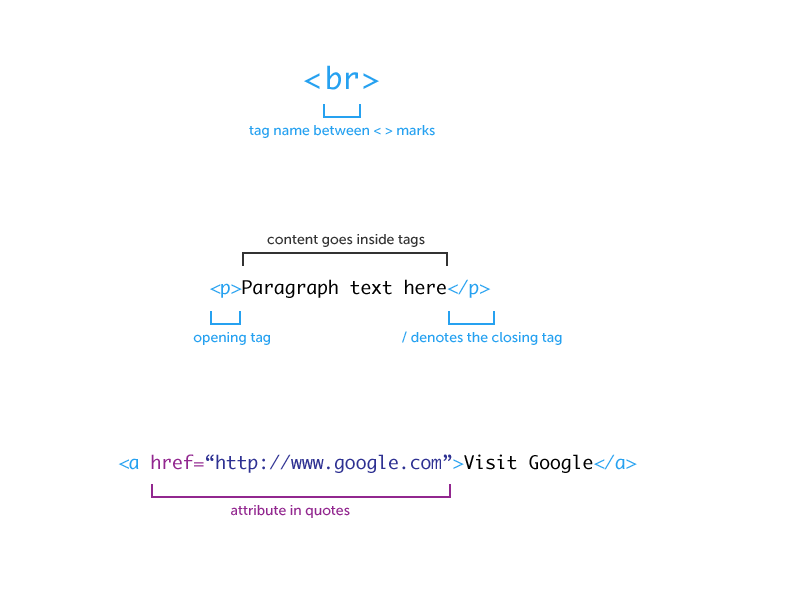
<style>
.page{position:relative;width:800px;height:600px;background:#ffffff}
.page>*{position:absolute;margin:0}
.t1{font:29.4px "Monaco";color:#26a1f0}
.t2{font:14px "MuseoSans-500";color:#26a1f0}
.t3{font:14px "MuseoSans-500";color:#333333}
.t4{font:18px "Monaco";color:#000000}
.t5{font:18px "Monaco";color:#26a1f0}
.t6{font:18px "Monaco";color:#2e3192}
.t7{font:18px "Monaco";color:#92278f}
.t8{font:14px "MuseoSans-500";color:#92278f}
</style>
<div class="page">
<p class="t1" style="left:304px;top:65px;width:75px;height:25px">&lt;br&gt;</p>
<p class="t2" style="left:249px;top:125px;width:186px;height:13px">tag name between &lt; &gt; marks</p>
<p class="t3" style="left:267px;top:234px;width:158px;height:13px">content goes inside tags</p>
<p class="t4" style="left:210px;top:279px;width:281px;height:19px"><span class="t5">&lt;p&gt;</span>Paragraph text here<span class="t5">&lt;/p&gt;</span></p>
<p class="t2" style="left:193px;top:332px;width:77px;height:13px">opening tag</p>
<p class="t2" style="left:402px;top:331px;width:160px;height:14px">/ denotes the closing tag</p>
<p class="t6" style="left:118px;top:454px;width:519px;height:19px"><span class="t5">&lt;a </span><span class="t7">href=</span>“http://www.google.com”<span class="t5">&gt;</span><span class="t4">Visit Google</span><span class="t5">&lt;/a&gt;</span></p>
<p class="t8" style="left:231px;top:505px;width:119px;height:13px">attribute in quotes</p>
</div>
